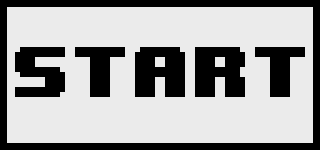
<style>
.page{position:relative;width:320px;height:150px;background:#ebebeb}
.page>*{position:absolute;margin:0}
.t1{font:60px "8BITWONDERNominal";color:#000000}
</style>
<div class="page">
<p class="t1" style="left:15px;top:47px;width:290px;height:50px">START</p>
</div>
